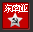
<style>
.page{position:relative;width:33px;height:32px;background:#c50000}
.page>*{position:absolute;margin:0}
.t1{font:10.4px "SimSun";letter-spacing:-0.25em;color:#ffffff}
</style>
<div class="page">
<p class="t1" style="left:4px;top:4px;width:24px;height:9px">东南亚</p>
</div>
